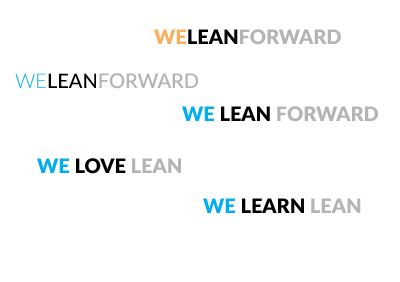
<style>
.page{position:relative;width:400px;height:282px;background:#ffffff}
.page>*{position:absolute;margin:0}
.t1{font:20px "Lato-Black";color:#b4b4b4}
.t2{font:20px "Lato-Black";color:#fbaf5d}
.t3{font:20px "Lato-Black";color:#000000}
.t4{font:20px "Lato-Semibold";color:#b4b4b4}
.t5{font:20px "Lato-Light";color:#00aeef}
.t6{font:20px "Lato-Medium";color:#000000}
.t7{font:20px "Lato-Black";color:#00aeef}
</style>
<div class="page">
<p class="t1" style="left:154px;top:29px;width:187px;height:16px"><span class="t2">WE</span><span class="t3">LEAN</span>FORWARD</p>
<p class="t4" style="left:15px;top:73px;width:183px;height:16px"><span class="t5">WE</span><span class="t6">LEAN</span>FORWARD</p>
<p class="t1" style="left:182px;top:106px;width:197px;height:16px"><span class="t7">WE </span><span class="t3">LEAN </span>FORWARD</p>
<p class="t3" style="left:37px;top:158px;width:144px;height:16px"><span class="t7">WE </span>LOVE <span class="t1">LEAN</span></p>
<p class="t3" style="left:203px;top:198px;width:158px;height:15px"><span class="t7">WE </span>LEARN <span class="t1">LEAN</span></p>
</div>
